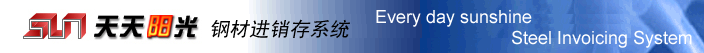
<style>
.page{position:relative;width:704px;height:53px;background:#ffffff}
.page>*{position:absolute;margin:0}
.t1{font:18px "ArialMT";color:#ffffff}
.t2{font:20px "SimHei";color:#000000;font-style:italic}
</style>
<div class="page">
<p class="t1" style="left:376px;top:10px;width:156px;height:17px">Every day sunshine</p>
<p class="t2" style="left:211px;top:19px;width:139px;height:20px">钢材进销存系统</p>
<p class="t1" style="left:512px;top:30px;width:180px;height:18px">Steel Invoicing System</p>
</div>
